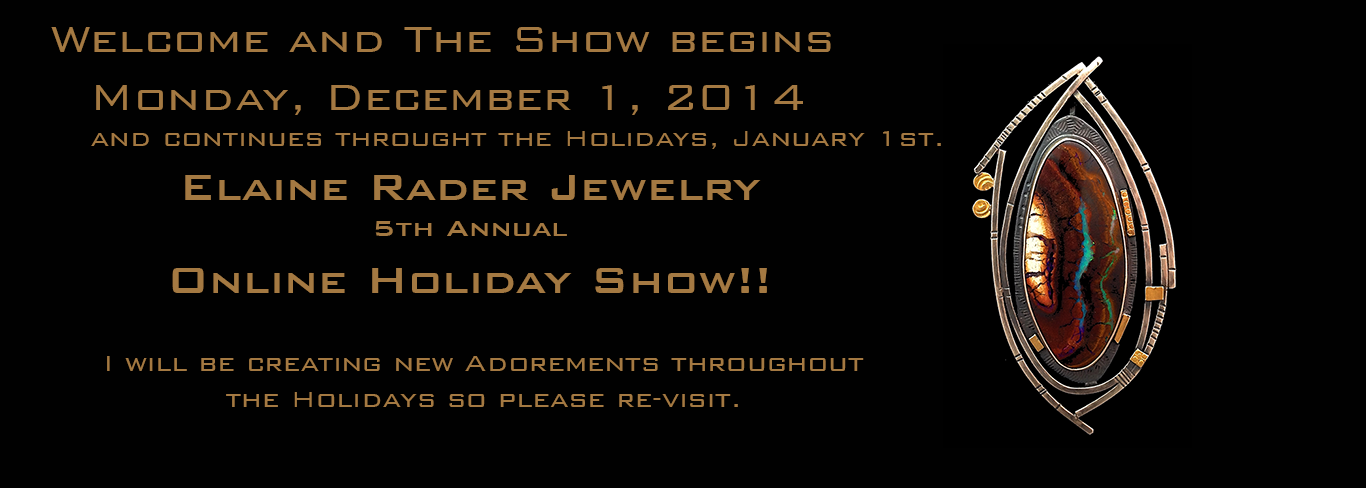
<style>
.page{position:relative;width:1366px;height:488px;background:#010101}
.page>*{position:absolute;margin:0}
.t1{font:48px "BankGothicBT-Light";color:#a47942}
.t2{font:30px "BankGothicBT-Light";color:#a47942}
.t3{font:48px "BankGothicBT-Medium";color:#a47942}
.t4{font:30px "BankGothicBT-Medium";color:#a47942}
</style>
<div class="page">
<p class="t1" style="left:51px;top:27px;width:890px;height:122px">Welcome and The Show begins<br>   Monday, December 1, 2014<br>     <span class="t2">and continues throught the Holidays, January 1st.</span></p>
<p class="t3" style="left:172px;top:175px;width:595px;height:118px;text-align:center">Elaine Rader Jewelry <br><span class="t4">5th Annual<br></span>Online Holiday Show!!</p>
<p class="t2" style="left:107px;top:356px;width:757px;height:51px">I will be creating new Adorements throughout the Holidays so please re-visit.</p>
</div>
